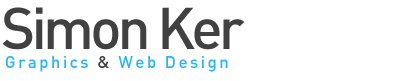
<style>
.page{position:relative;width:400px;height:81px;background:#ffffff}
.page>*{position:absolute;margin:0}
.t1{font:17px/18.9px "DIN-Medium";letter-spacing:0.135em;color:#28b6f4}
.t2{font:58.1px/34.9px "DIN-Medium";letter-spacing:-0.065em;color:#414141}
.t3{font:17px/18.9px "DIN-Medium";letter-spacing:0.135em;color:#414141}
</style>
<div class="page">
<p class="t1" style="left:2px;top:7px;width:243px;height:65px"><span class="t2">Simon Ker<br> </span>Graphics <span class="t3">&amp;</span> Web Design</p>
</div>
